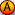
<style>
.page{position:relative;width:15px;height:15px}
.page>*{position:absolute;margin:0}
.t1{font:12px "Tahoma";color:#000000}
</style>
<div class="page">
<p class="t1" style="left:3px;top:2px;width:8px;height:9px">A</p>
</div>
